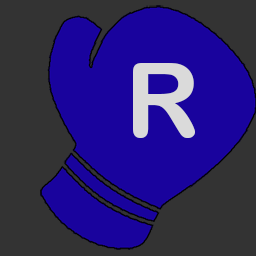
<style>
.page{position:relative;width:256px;height:256px;background:#333333}
.page>*{position:absolute;margin:0}
.t1{font:104.4px "ArialRoundedMTBold";color:#dadada}
</style>
<div class="page">
<p class="t1" style="left:133px;top:63px;width:62px;height:75px">R</p>
</div>
